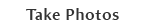
<style>
.page{position:relative;width:144px;height:28px;background:#ffffff}
.page>*{position:absolute;margin:0}
.t1{font:16px "AmiraParadiso";letter-spacing:0.05em;color:#333333}
</style>
<div class="page">
<p class="t1" style="left:26px;top:8px;width:93px;height:12px">Take Photos</p>
</div>
